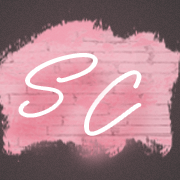
<style>
.page{position:relative;width:180px;height:180px}
.page>*{position:absolute;margin:0}
.t1{font:84px "Bayshore";color:#ffffff}
</style>
<div class="page">
<p class="t1" style="left:19px;top:54px;width:78px;height:63px">S</p>
<p class="t1" style="left:85px;top:71px;width:56px;height:64px">C</p>
</div>
